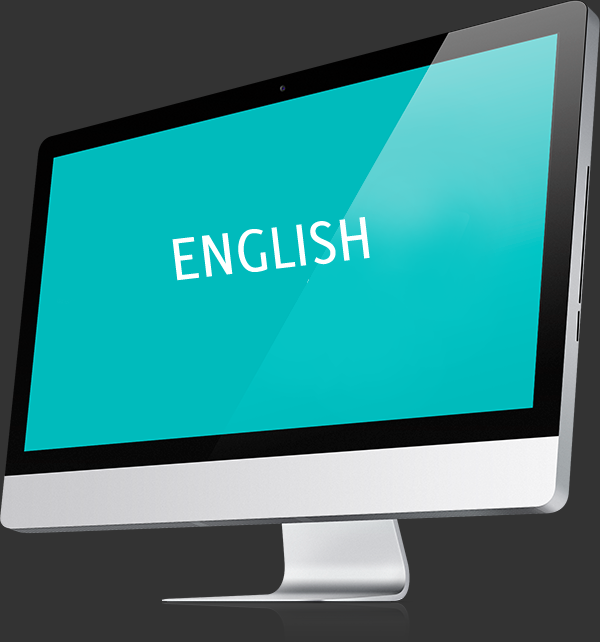
<style>
.page{position:relative;width:600px;height:642px;background:#333333}
.page>*{position:absolute;margin:0}
.t1{font:65px "Delicious-Roman";color:#ffffff}
</style>
<div class="page">
<p class="t1" style="left:172px;top:217px;width:198px;height:64px;rotate:-7deg">ENGLISH</p>
</div>
